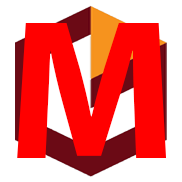
<style>
.page{position:relative;width:182px;height:182px;background:#ffffff}
.page>*{position:absolute;margin:0}
.t1{font:200px "MyriadPro-Bold";color:#ff0000}
</style>
<div class="page">
<p class="t1" style="left:17px;top:23px;width:149px;height:135px">M</p>
</div>
